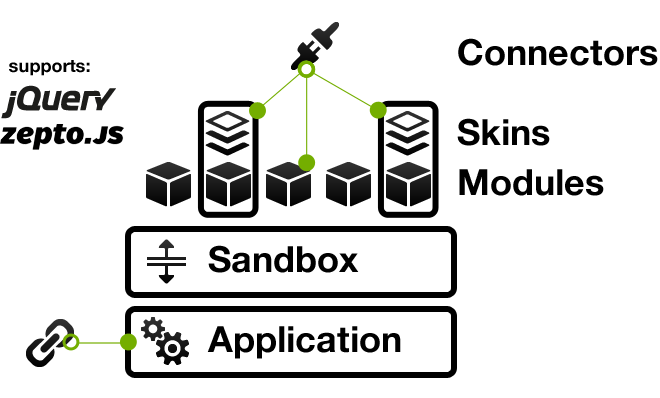
<style>
.page{position:relative;width:660px;height:398px;background:#ffffff}
.page>*{position:absolute;margin:0}
.t1{font:36px "HelveticaNeue-Bold";color:#000000}
.t2{font:18px "HelveticaNeue-Bold";color:#000000}
</style>
<div class="page">
<p class="t1" style="left:458px;top:38px;width:200px;height:28px">Connectors</p>
<p class="t2" style="left:9px;top:60px;width:81px;height:16px">supports:</p>
<p class="t1" style="left:457px;top:118px;width:93px;height:28px">Skins</p>
<p class="t1" style="left:459px;top:169px;width:145px;height:27px">Modules</p>
<p class="t1" style="left:208px;top:245px;width:151px;height:28px">Sandbox</p>
<p class="t1" style="left:207px;top:326px;width:194px;height:33px">Application</p>
</div>
